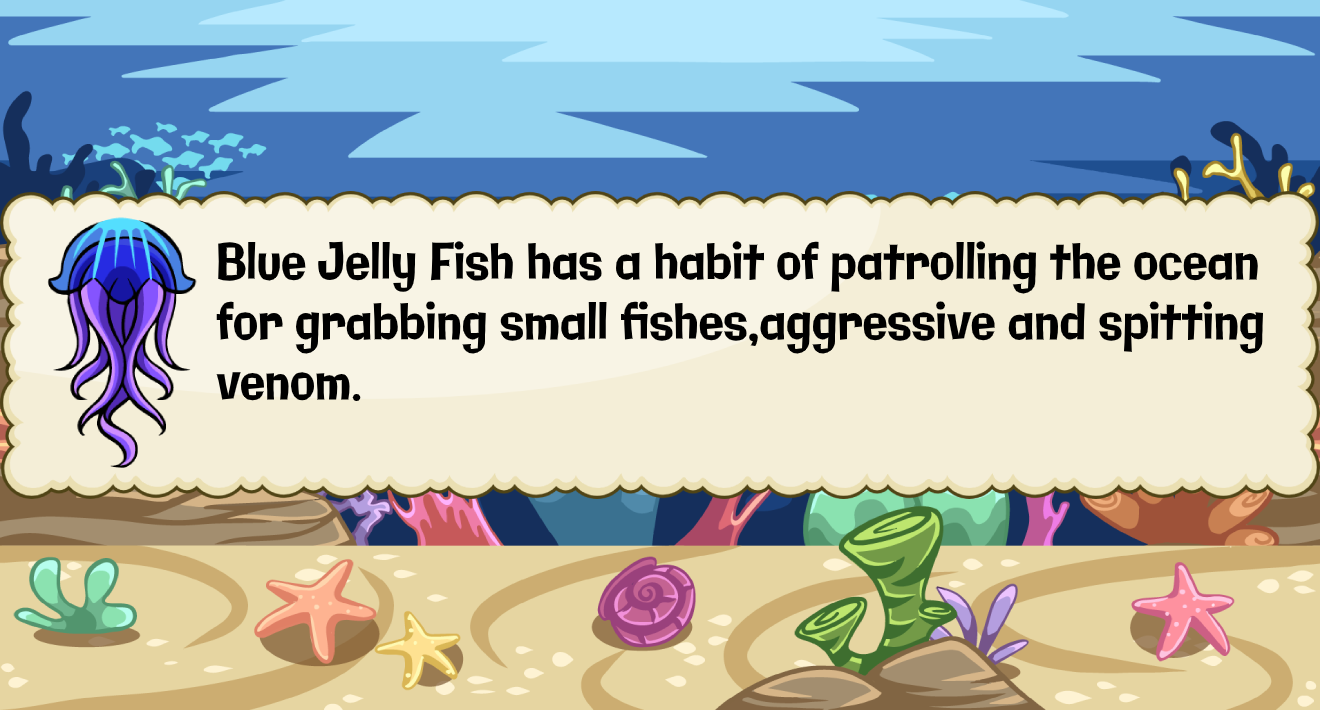
<style>
.page{position:relative;width:1320px;height:710px;background:#f4eed7}
.page>*{position:absolute;margin:0}
.t1{font:50.1px "Galindo-Regular";color:#000000;scale:0.82 1}
</style>
<div class="page">
<p class="t1" style="left:216px;top:241px;width:1048px;height:160px">Blue Jelly Fish has a habit of patrolling the ocean<br>for grabbing small fishes,aggressive and spitting <br>venom.</p>
</div>
